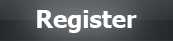
<style>
.page{position:relative;width:173px;height:41px}
.page>*{position:absolute;margin:0}
.t1{font:24px "Tahoma-Bold";color:#ffffff}
</style>
<div class="page">
<p class="t1" style="left:37px;top:10px;width:100px;height:23px">Register</p>
</div>
